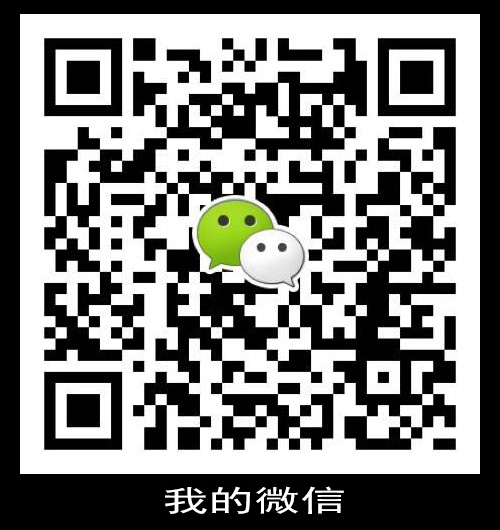
<style>
.page{position:relative;width:500px;height:530px;background:#000000}
.page>*{position:absolute;margin:0}
.t1{font:30px "SimHei";color:#ffffff;scale:1.53 1}
</style>
<div class="page">
<p class="t1" style="left:165px;top:486px;width:179px;height:28px">我的微信</p>
</div>
